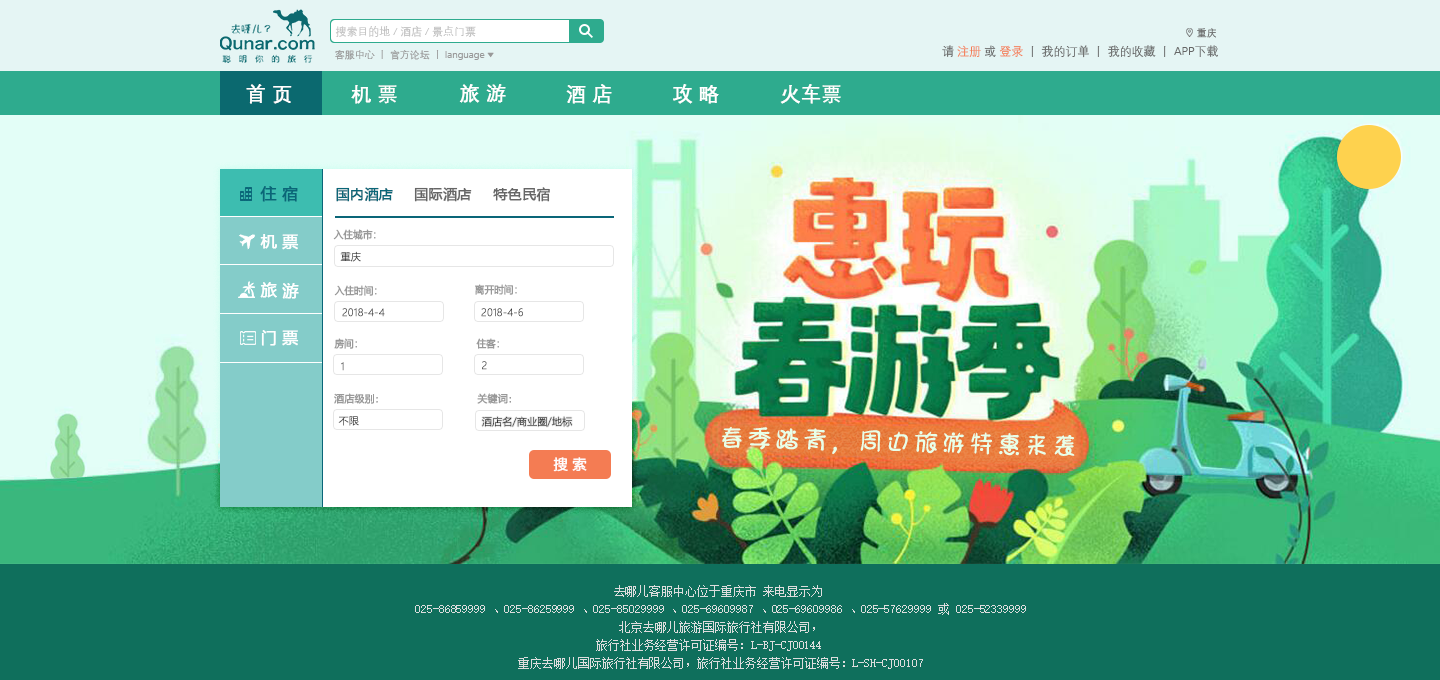
<style>
.page{position:relative;width:1440px;height:680px}
.page>*{position:absolute;margin:0}
.t1{font:11px "DengXian-Regular";letter-spacing:-0.005em;color:#bfbfbf}
.t2{font:10px "DengXian-Regular";letter-spacing:-0.005em;color:#666666}
.t3{font:12px "DengXian-Regular";letter-spacing:-0.005em;color:#666666}
.t4{font:12px "DengXian-Regular";letter-spacing:-0.005em;color:#f47c53}
.t5{font:20px "DengXian-Regular";letter-spacing:-0.005em;color:#ffffff;font-weight:bold}
.t6{font:16px "MicrosoftYaHei";color:#0a6678;font-weight:bold}
.t7{font:14px "MicrosoftYaHei";color:#0a6678;font-weight:bold}
.t8{font:14px "MicrosoftYaHei";color:#666666;font-weight:bold}
.t9{font:10px "MicrosoftYaHeiLight";letter-spacing:-0.005em;color:#999999;font-weight:bold;scale:0.95 1}
.t10{font:16px "MicrosoftYaHei";color:#ffffff;font-weight:bold}
.t11{font:10px "MicrosoftYaHeiLight";letter-spacing:-0.005em;font-weight:bold}
.t12{font:10px "MicrosoftYaHeiLight";font-weight:bold}
.t13{font:10px "MicrosoftYaHeiLight";color:#333333;font-weight:bold}
.t14{font:10px "MicrosoftYaHeiLight";letter-spacing:-0.005em;color:#999999;font-weight:bold}
.t15{font:14px "MicrosoftYaHeiLight";letter-spacing:-0.005em;color:#ffffff;font-weight:bold}
.t16{font:12px/18px "SimSun";letter-spacing:-0.005em;color:#dddddd}
</style>
<div class="page">
<p class="t1" style="left:335px;top:26px;width:141px;height:11px">搜索目的地 / 酒店 / 景点门票</p>
<p class="t2" style="left:1197px;top:28px;width:19px;height:10px">重庆</p>
<p class="t3" style="left:942px;top:45px;width:276px;height:13px">请 <span class="t4">注册 </span>或 <span class="t4">登录</span> 丨 我的订单 丨 我的收藏 丨 APP下载</p>
<p class="t5" style="left:246px;top:84px;width:46px;height:20px">首 页</p>
<p class="t5" style="left:351px;top:85px;width:46px;height:19px">机 票</p>
<p class="t5" style="left:459px;top:84px;width:47px;height:19px">旅 游</p>
<p class="t5" style="left:566px;top:84px;width:46px;height:20px">酒 店</p>
<p class="t5" style="left:673px;top:84px;width:46px;height:20px">攻 略</p>
<p class="t5" style="left:780px;top:84px;width:61px;height:20px">火车票</p>
<p class="t6" style="left:260px;top:186px;width:38px;height:16px">住 宿</p>
<p class="t7" style="left:336px;top:187px;width:57px;height:15px">国内酒店</p>
<p class="t8" style="left:414px;top:187px;width:58px;height:15px">国际酒店</p>
<p class="t8" style="left:493px;top:187px;width:57px;height:15px">特色民宿</p>
<p class="t9" style="left:333px;top:229px;width:43px;height:11px">入住城市：</p>
<p class="t10" style="left:260px;top:234px;width:39px;height:16px">机 票</p>
<p class="t11" style="left:340px;top:251px;width:21px;height:11px">重庆</p>
<p class="t10" style="left:260px;top:282px;width:39px;height:17px">旅 游</p>
<p class="t9" style="left:334px;top:285px;width:43px;height:11px">入住时间：</p>
<p class="t9" style="left:475px;top:284px;width:42px;height:11px">离开时间：</p>
<p class="t12" style="left:342px;top:308px;width:43px;height:9px">2018-4-4</p>
<p class="t13" style="left:481px;top:308px;width:42px;height:9px">2018-4-6</p>
<p class="t10" style="left:261px;top:330px;width:38px;height:16px">门 票</p>
<p class="t9" style="left:334px;top:338px;width:23px;height:11px">房间：</p>
<p class="t9" style="left:476px;top:338px;width:23px;height:11px">住客：</p>
<p class="t11" style="left:341px;top:362px;width:3px;height:9px">1</p>
<p class="t11" style="left:482px;top:361px;width:5px;height:9px">2</p>
<p class="t14" style="left:334px;top:393px;width:44px;height:11px">酒店级别：</p>
<p class="t14" style="left:477px;top:393px;width:34px;height:11px">关键词：</p>
<p class="t12" style="left:338px;top:416px;width:21px;height:10px">不限</p>
<p class="t13" style="left:482px;top:416px;width:90px;height:11px">酒店名/商业圈/地标</p>
<p class="t15" style="left:553px;top:457px;width:34px;height:15px">搜 索</p>
<p class="t16" style="left:415px;top:585px;width:611px;height:84px;text-align:center">去哪儿客服中心位于重庆市 来电显示为 <br>025-86859999 、025-86259999 、025-85029999 、025-69609987 、025-69609986 、025-57629999 或 025-52339999<br>北京去哪儿旅游国际旅行社有限公司，<br>旅行社业务经营许可证编号：L-BJ-CJ00144　　<br>重庆去哪儿国际旅行社有限公司，旅行社业务经营许可证编号：L-SH-CJ00107</p>
</div>
